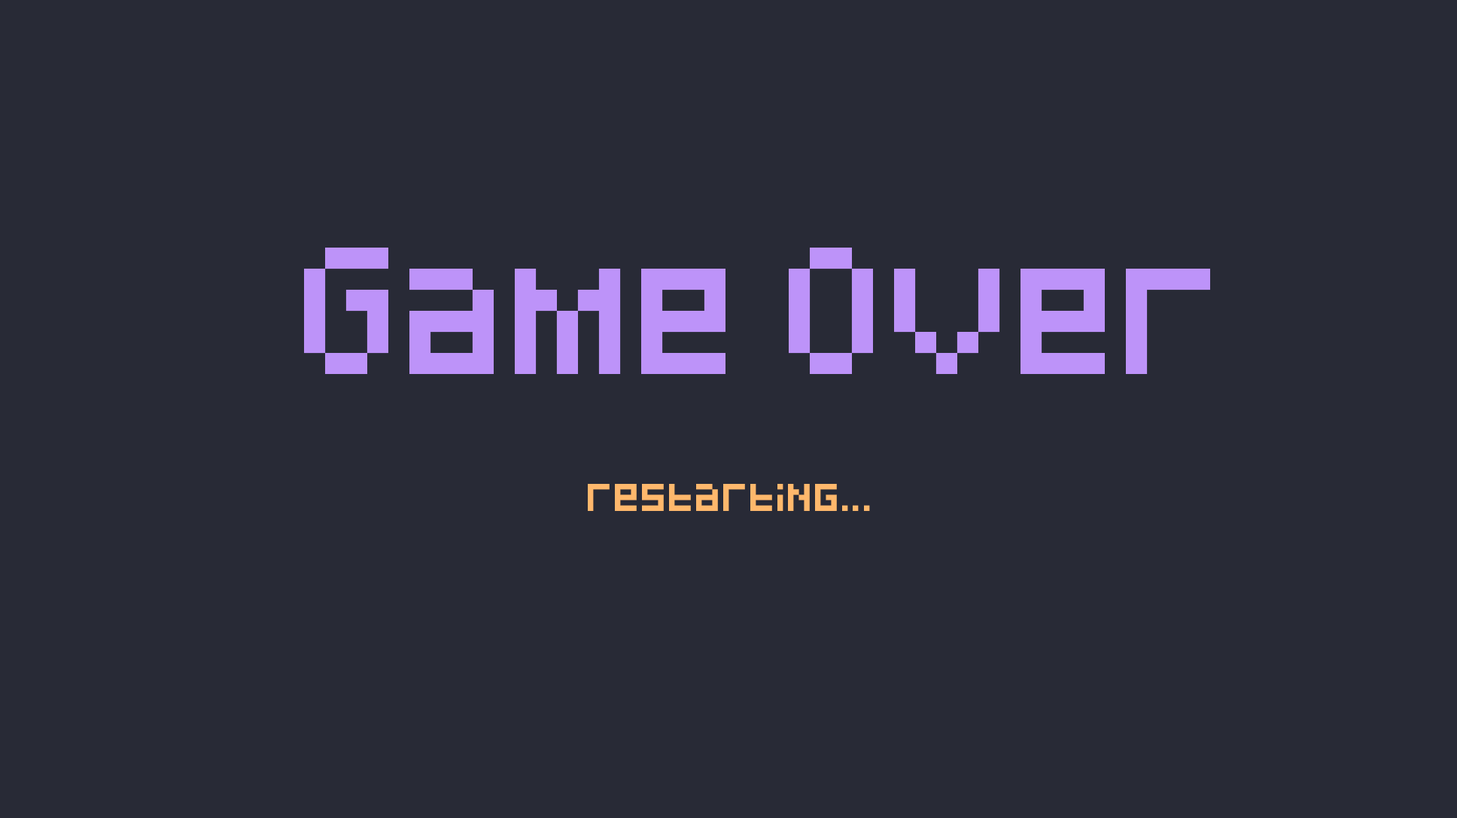
<style>
.page{position:relative;width:1457px;height:818px;background:#282a36}
.page>*{position:absolute;margin:0}
.t1{font:105.4px "Pixeled";color:#bd93f9}
.t2{font:27.1px "Pixeled";color:#ffb86c}
</style>
<div class="page">
<p class="t1" style="left:304px;top:248px;width:906px;height:126px">Game Over</p>
<p class="t2" style="left:588px;top:484px;width:282px;height:27px">restarting...</p>
</div>
